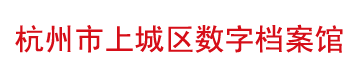
<style>
.page{position:relative;width:353px;height:66px;background:#ffffff}
.page>*{position:absolute;margin:0}
.t1{font:30px "SimHei";color:#d60e18}
</style>
<div class="page">
<p class="t1" style="left:15px;top:24px;width:328px;height:29px">杭州市上城区数字档案馆</p>
</div>
